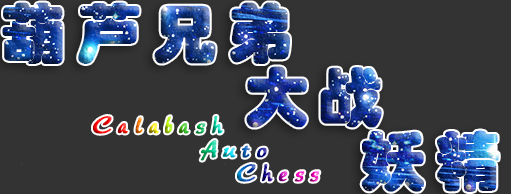
<style>
.page{position:relative;width:511px;height:194px;background:#333333}
.page>*{position:absolute;margin:0}
.t1{font:64px/64px "STHupo";letter-spacing:0.15em;font-weight:bold}
</style>
<div class="page">
<p class="t1" style="left:2px;top:2px;width:497px;height:190px">葫芦兄弟<br>       大战<br>          妖精</p>
</div>
